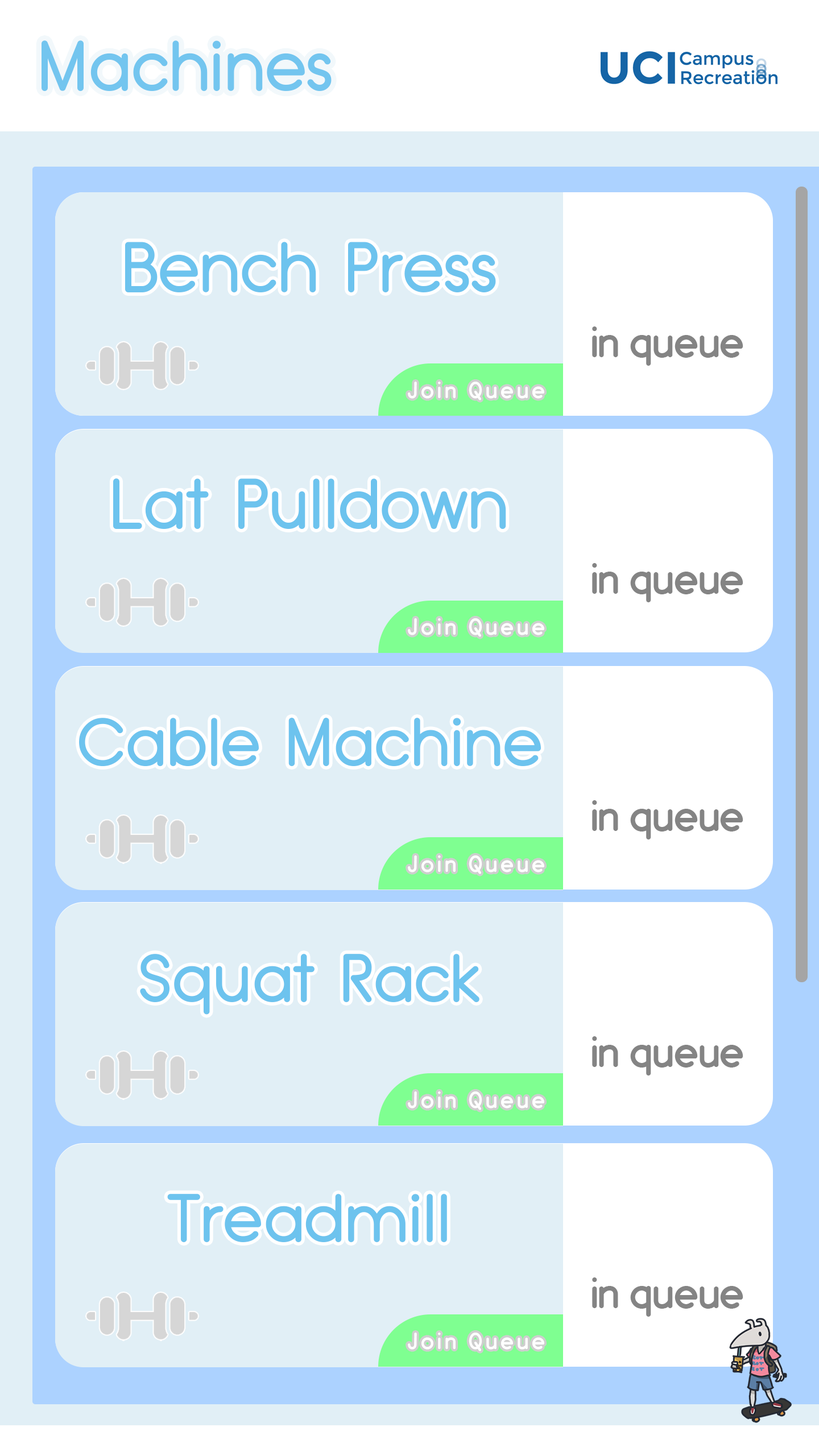
<style>
.page{position:relative;width:819px;height:1456px;background:#e1eff6}
.page>*{position:absolute;margin:0}
.t1{font:68.2px "TypoGroteskRounded";color:#6dc3ee}
.t2{font:47.8px "EspressoDolce";color:#848484}
.t3{font:102.4px "EspressoDolce";color:#4a4a4a}
.t4{font:25.6px "EspressoDolce";letter-spacing:0.13em;color:#ffffff}
.t5{font:65.4px "TypoGroteskRounded";color:#6dc3ee}
</style>
<div class="page">
<p class="t1" style="left:42px;top:40px;width:290px;height:51px;opacity:0.97">Machines</p>
<p class="t1" style="left:125px;top:242px;width:371px;height:50px">Bench Press</p>
<p class="t2" style="left:592px;top:326px;width:151px;height:40px"><span class="t3"><br></span>in queue</p>
<p class="t4" style="left:408px;top:382px;width:136px;height:18px">Join Queue</p>
<p class="t1" style="left:113px;top:478px;width:393px;height:51px">Lat Pulldown</p>
<p class="t2" style="left:592px;top:563px;width:151px;height:39px"><span class="t3"><br></span>in queue</p>
<p class="t4" style="left:408px;top:618px;width:136px;height:19px">Join Queue</p>
<p class="t5" style="left:79px;top:717px;width:462px;height:49px"><span class="t1"><br><br><br><br><br><br><br><br><br><br><br></span>Cable Machine</p>
<p class="t2" style="left:592px;top:800px;width:151px;height:39px"><span class="t3"><br></span>in queue</p>
<p class="t4" style="left:408px;top:855px;width:136px;height:19px">Join Queue</p>
<p class="t5" style="left:140px;top:954px;width:339px;height:61px"><span class="t1"><br><br><br><br><br><br><br><br><br><br><br></span>Squat Rack</p>
<p class="t2" style="left:592px;top:1036px;width:151px;height:39px"><span class="t3"><br></span>in queue</p>
<p class="t4" style="left:408px;top:1091px;width:136px;height:19px">Join Queue</p>
<p class="t5" style="left:167px;top:1194px;width:280px;height:48px"><span class="t1"><br><br><br><br><br><br><br><br><br><br><br></span>Treadmill</p>
<p class="t2" style="left:592px;top:1277px;width:151px;height:40px"><span class="t3"><br></span>in queue</p>
<p class="t4" style="left:408px;top:1333px;width:136px;height:18px">Join Queue</p>
</div>
